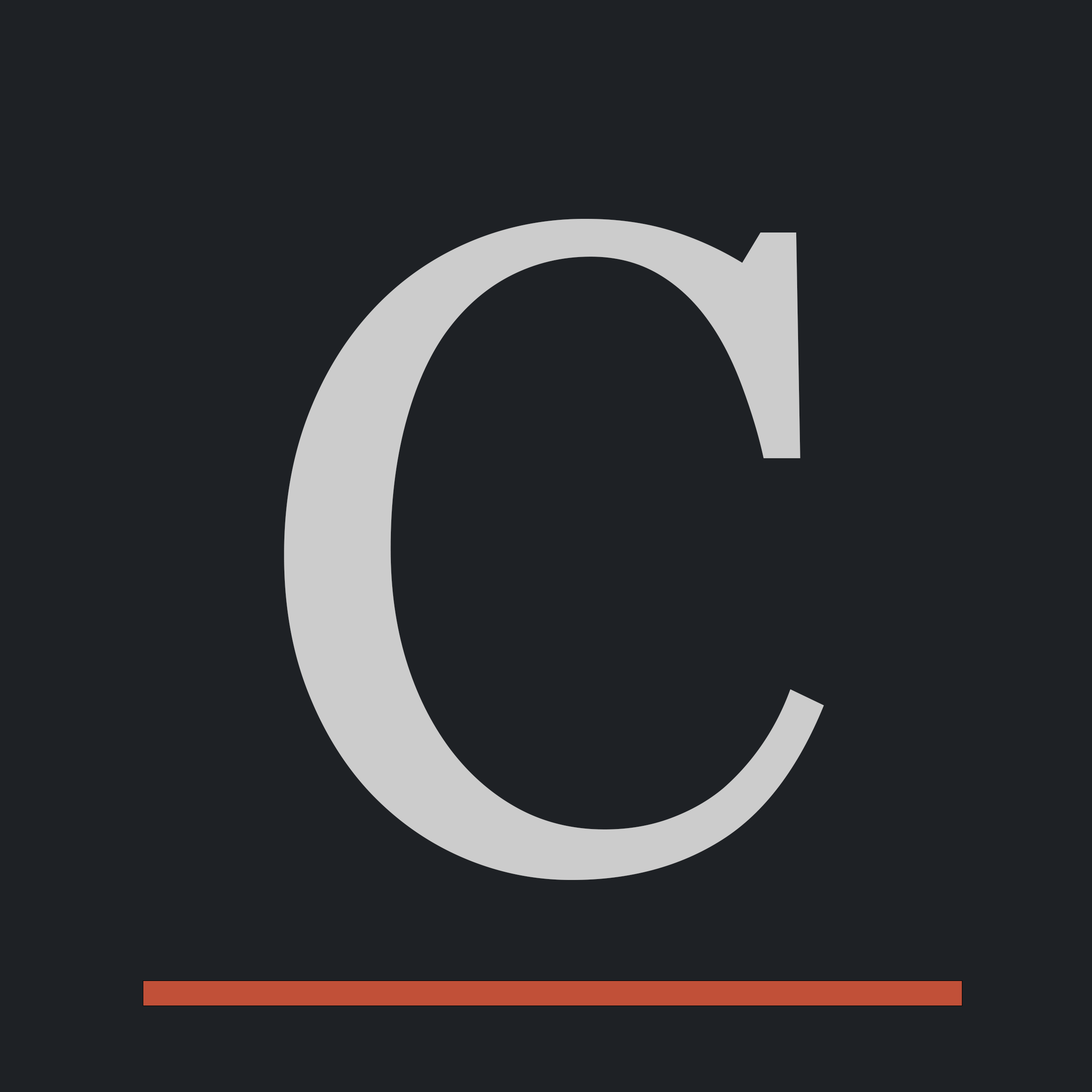
<style>
.page{position:relative;width:1092px;height:1092px;background:#1e2125}
.page>*{position:absolute;margin:0}
.t1{font:912.6px "Georgia";color:#cccccc}
</style>
<div class="page">
<p class="t1" style="left:284px;top:219px;width:540px;height:661px">C</p>
</div>
